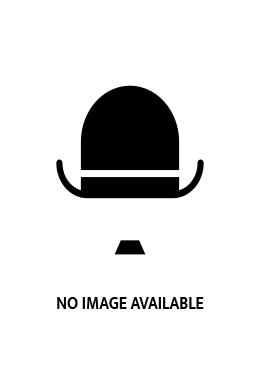
<style>
.page{position:relative;width:260px;height:390px;background:#ffffff}
.page>*{position:absolute;margin:0}
.t1{font:18.2px "MuktaMahee-SemiBold";color:#000000;scale:0.87 1}
</style>
<div class="page">
<p class="t1" style="left:57px;top:297px;width:147px;height:12px">NO IMAGE AVAILABLE</p>
</div>
